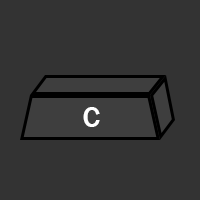
<style>
.page{position:relative;width:200px;height:200px;background:#333333}
.page>*{position:absolute;margin:0}
.t1{font:30px "FranklinGothic-Medium";color:#ffffff}
</style>
<div class="page">
<p class="t1" style="left:83px;top:107px;width:17px;height:20px">С</p>
</div>
